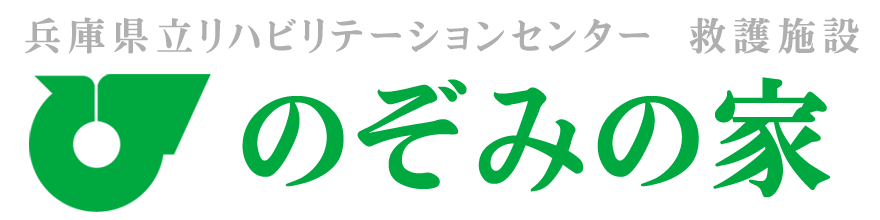
<style>
.page{position:relative;width:880px;height:220px;background:#ffffff}
.page>*{position:absolute;margin:0}
.t1{font:40px "vsbshiomiDB-P";letter-spacing:0.15em;color:#afafaf}
.t2{font:130px "vsbshiomiDB-P";letter-spacing:0.05em;color:#00a940}
</style>
<div class="page">
<p class="t1" style="left:25px;top:17px;width:834px;height:37px">兵庫県立リハビリテーションセンター  救護施設</p>
<p class="t2" style="left:242px;top:77px;width:588px;height:121px">のぞみの家</p>
</div>
